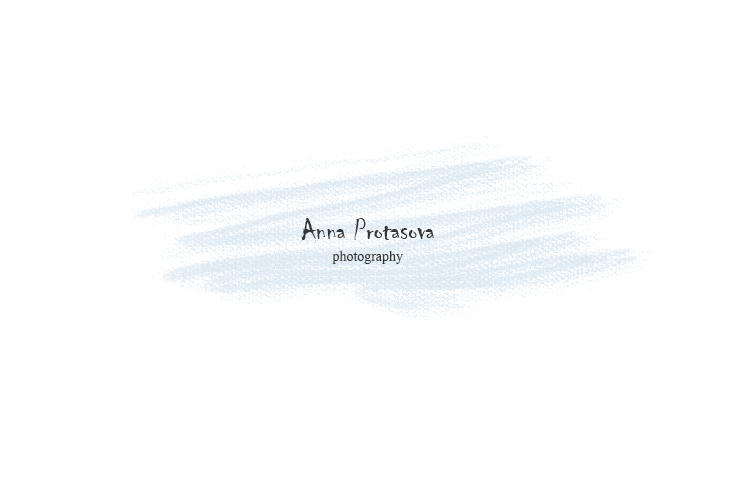
<style>
.page{position:relative;width:735px;height:480px;background:#ffffff}
.page>*{position:absolute;margin:0}
.t1{font:30px "Chiller-Regular";color:#333639}
.t2{font:18px "Kokila";color:#333639}
</style>
<div class="page">
<p class="t1" style="left:301px;top:218px;width:133px;height:23px">Anna Protasova</p>
<p class="t2" style="left:332px;top:251px;width:71px;height:13px">photography</p>
</div>
